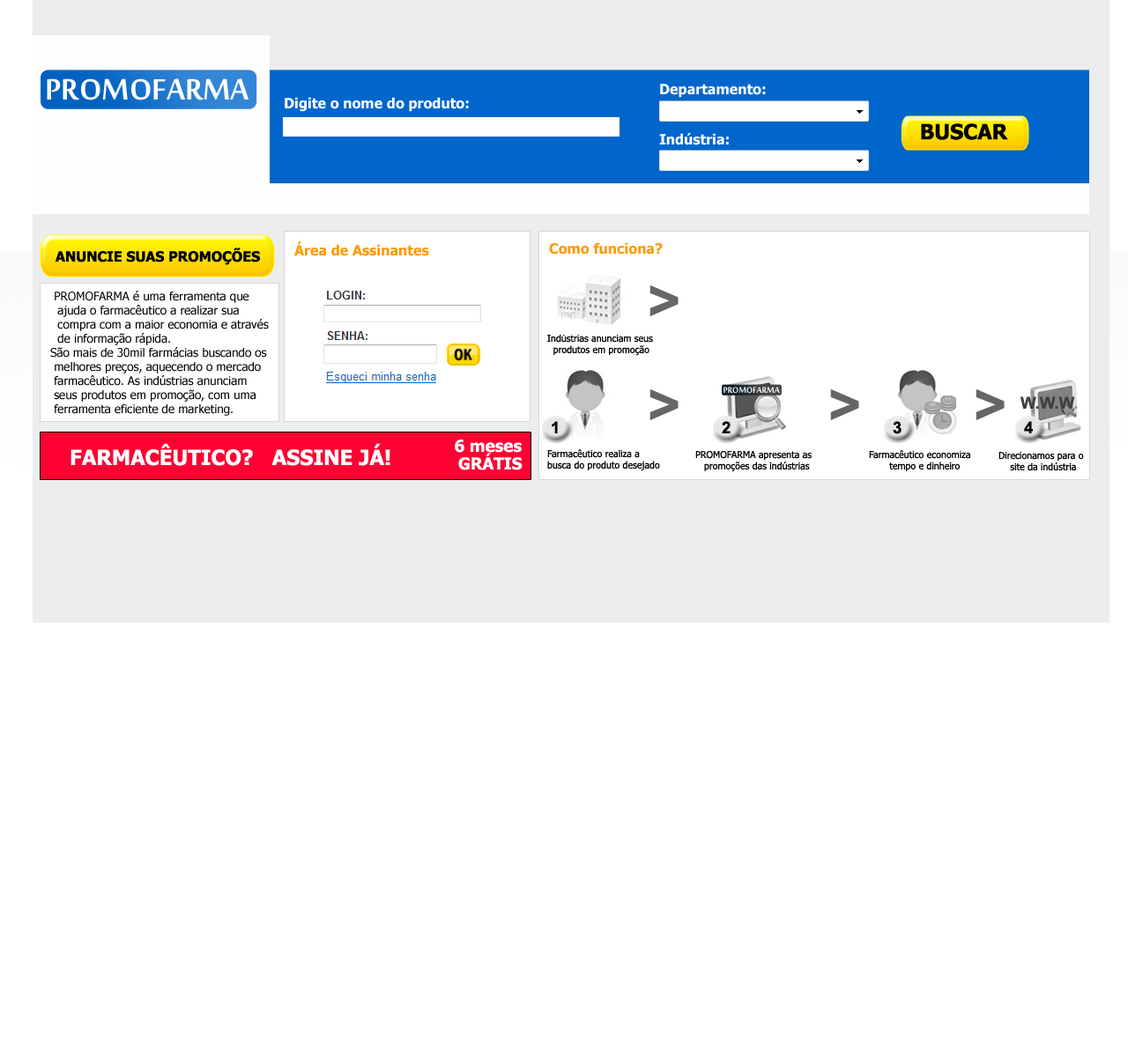
<style>
.page{position:relative;width:1128px;height:1057px;background:#ffffff}
.page>*{position:absolute;margin:0}
.t1{font:45.2px "MoolBoran";color:#feffff}
.t2{font:14.1px "Tahoma-Bold";color:#ffffff}
.t3{font:21.1px "Tahoma-Bold";color:#000000}
.t4{font:14.1px "Tahoma-Bold";color:#ff9900}
.t5{font:14.1px "Tahoma-Bold";color:#000000}
.t6{font:11.7px "Tahoma";color:#000000}
.t7{font:56.4px "Arial-BoldMT";color:#666666}
.t8{font:9.4px "Tahoma";color:#000000}
.t9{font:12.5px "MoolBoran";color:#feffff}
.t10{font:16.4px "Arial-BoldMT";color:#3f3f3f}
.t11{font:16.4px "Arial-BoldMT";color:#969595}
.t12{font:16.4px "Arial-BoldMT";color:#000000}
.t13{font:21.1px "Tahoma-Bold";color:#feffff}
.t14{font:16.4px "Tahoma-Bold";color:#fefefe}
.t15{font:9.4px "Tahoma";color:#000102}
</style>
<div class="page">
<p class="t1" style="left:47px;top:78px;width:202px;height:22px">PROMOFARMA</p>
<p class="t2" style="left:660px;top:84px;width:106px;height:14px">Departamento:</p>
<p class="t2" style="left:285px;top:97px;width:184px;height:15px">Digite o nome do produto:</p>
<p class="t3" style="left:921px;top:123px;width:87px;height:17px">BUSCAR</p>
<p class="t2" style="left:659px;top:133px;width:70px;height:12px">Indústria:</p>
<p class="t4" style="left:294px;top:241px;width:135px;height:15px">Área de Assinantes</p>
<p class="t4" style="left:549px;top:242px;width:114px;height:13px">Como funciona?</p>
<p class="t5" style="left:55px;top:248px;width:205px;height:17px">ANUNCIE SUAS PROMOÇÕES</p>
<p class="t6" style="left:50px;top:291px;width:219px;height:125px">PROMOFARMA é uma ferramenta que <br>  ajuda o farmacêutico a realizar sua <br>  compra com a maior economia e através <br>  de informação rápida.<br>São mais de 30mil farmácias buscando os<br> melhores preços, aquecendo o mercado<br> farmacêutico. As indústrias anunciam<br> seus produtos em promoção, com uma <br> ferramenta eficiente de marketing.</p>
<p class="t7" style="left:649px;top:285px;width:29px;height:31px">&gt;</p>
<p class="t8" style="left:547px;top:334px;width:106px;height:22px">Indústrias anunciam seus<br>  produtos em promoção</p>
<p class="t7" style="left:649px;top:389px;width:29px;height:31px">&gt;</p>
<p class="t9" style="left:723px;top:387px;width:57px;height:6px">PROMOFARMA</p>
<p class="t7" style="left:830px;top:389px;width:29px;height:31px">&gt;</p>
<p class="t7" style="left:975px;top:389px;width:29px;height:31px">&gt;</p>
<p class="t10" style="left:1020px;top:396px;width:58px;height:13px">W.W.W<span class="t11">.</span></p>
<p class="t12" style="left:552px;top:421px;width:6px;height:12px">1</p>
<p class="t12" style="left:722px;top:421px;width:8px;height:12px">2</p>
<p class="t12" style="left:893px;top:421px;width:8px;height:13px">3</p>
<p class="t12" style="left:1024px;top:421px;width:9px;height:12px">4</p>
<p class="t13" style="left:70px;top:443px;width:320px;height:23px">FARMACÊUTICO?   ASSINE JÁ!</p>
<p class="t14" style="left:455px;top:440px;width:67px;height:13px">6 meses</p>
<p class="t15" style="left:547px;top:449px;width:113px;height:22px">Farmacêutico realiza a<br>busca do produto desejado</p>
<p class="t14" style="left:458px;top:453px;width:64px;height:18px">GRÁTIS</p>
<p class="t15" style="left:695px;top:451px;width:116px;height:21px">PROMOFARMA apresenta as<br>      promoções das indústrias</p>
<p class="t15" style="left:869px;top:450px;width:101px;height:21px">Farmacêutico economiza<br>       tempo e dinheiro</p>
<p class="t15" style="left:998px;top:452px;width:86px;height:19px">Direcionamos para o <br>    site da indústria</p>
</div>
